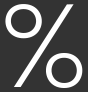
<style>
.page{position:relative;width:88px;height:92px;background:#333333}
.page>*{position:absolute;margin:0}
.t1{font:118.9px "NexaLight";color:#ffffff}
</style>
<div class="page">
<p class="t1" style="left:5px;top:4px;width:78px;height:84px">%</p>
</div>
